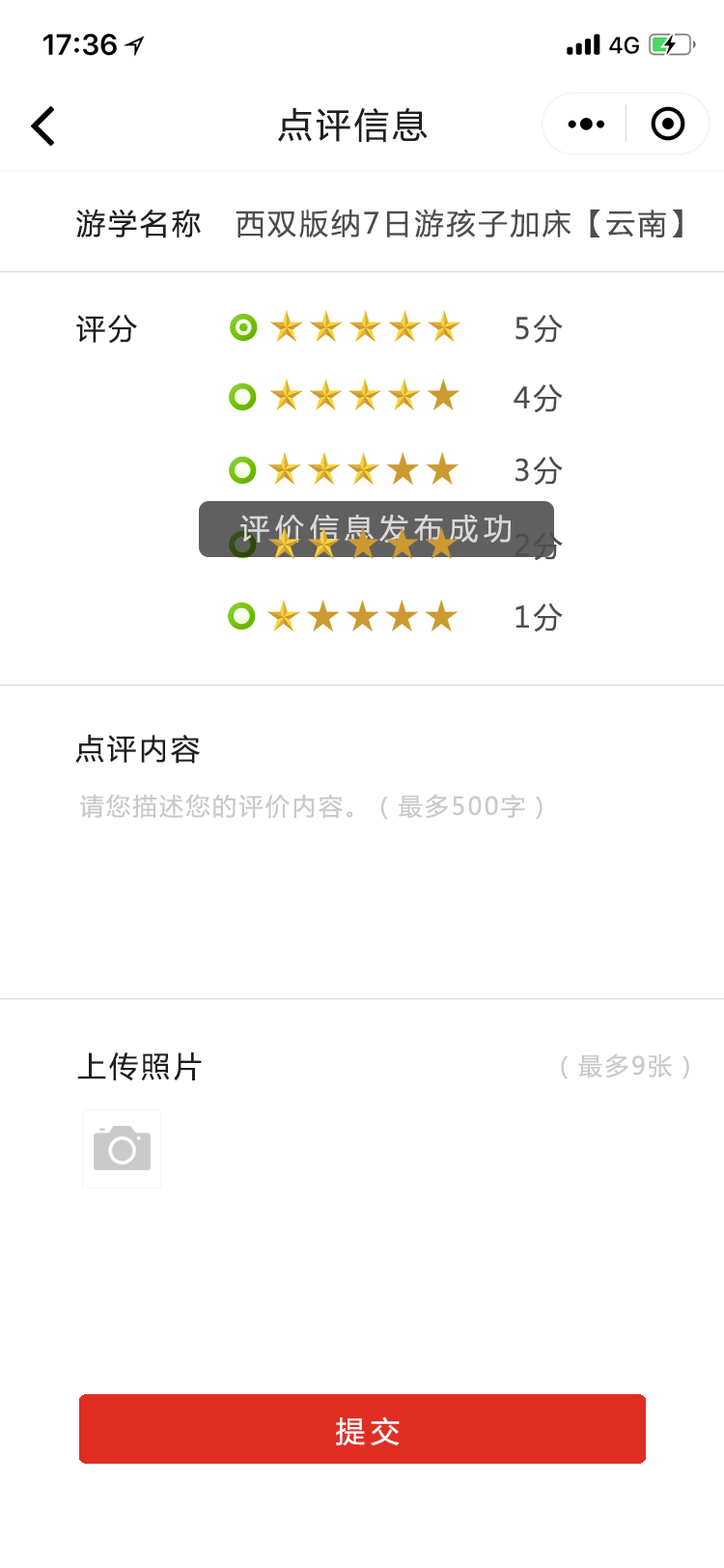
<style>
.page{position:relative;width:724px;height:1568px;background:#ffffff}
.page>*{position:absolute;margin:0}
.t1{font:34.8px "MicrosoftYaHei";letter-spacing:0.1em;color:#201f20}
.t2{font:29px "MicrosoftYaHei";letter-spacing:0.1em;color:#1f1e1e}
.t3{font:29px "MicrosoftYaHei";letter-spacing:0.1em;color:#4e4d4d}
.t4{font:29px "MicrosoftYaHei";letter-spacing:0.2em;color:#ddd8d8}
.t5{font:24.1px "MicrosoftYaHei";letter-spacing:0.1em;color:#cac9c9}
.t6{font:29px "MicrosoftYaHei";letter-spacing:0.2em;color:#fcf8f8}
</style>
<div class="page">
<p class="t1" style="left:278px;top:107px;width:150px;height:35px">点评信息</p>
<p class="t2" style="left:76px;top:209px;width:125px;height:29px">游学名称</p>
<p class="t3" style="left:236px;top:209px;width:447px;height:29px">西双版纳7日游孩子加床【云南】</p>
<p class="t2" style="left:76px;top:314px;width:61px;height:30px">评分</p>
<p class="t3" style="left:516px;top:314px;width:47px;height:30px">5分</p>
<p class="t3" style="left:514px;top:383px;width:49px;height:30px">4分</p>
<p class="t3" style="left:516px;top:456px;width:47px;height:30px">3分</p>
<p class="t4" style="left:240px;top:514px;width:271px;height:30px">评价信息发布成功</p>
<p class="t3" style="left:515px;top:531px;width:48px;height:30px">2分</p>
<p class="t3" style="left:516px;top:602px;width:47px;height:30px">1分</p>
<p class="t2" style="left:75px;top:734px;width:125px;height:30px">点评内容</p>
<p class="t5" style="left:79px;top:794px;width:464px;height:26px">请您描述您的评价内容。（最多500字）</p>
<p class="t2" style="left:77px;top:1052px;width:125px;height:29px">上传照片</p>
<p class="t5" style="left:561px;top:1053px;width:128px;height:26px">（最多9张）</p>
<p class="t6" style="left:336px;top:1416px;width:64px;height:29px">提交</p>
</div>
